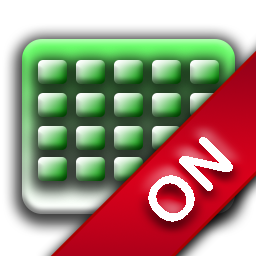
<style>
.page{position:relative;width:256px;height:256px}
.page>*{position:absolute;margin:0}
.t1{font:62.3px "ArialRoundedMTBold";color:#ffffff}
</style>
<div class="page">
<p class="t1" style="left:148px;top:137px;width:85px;height:85px;rotate:-45deg">ON</p>
</div>
